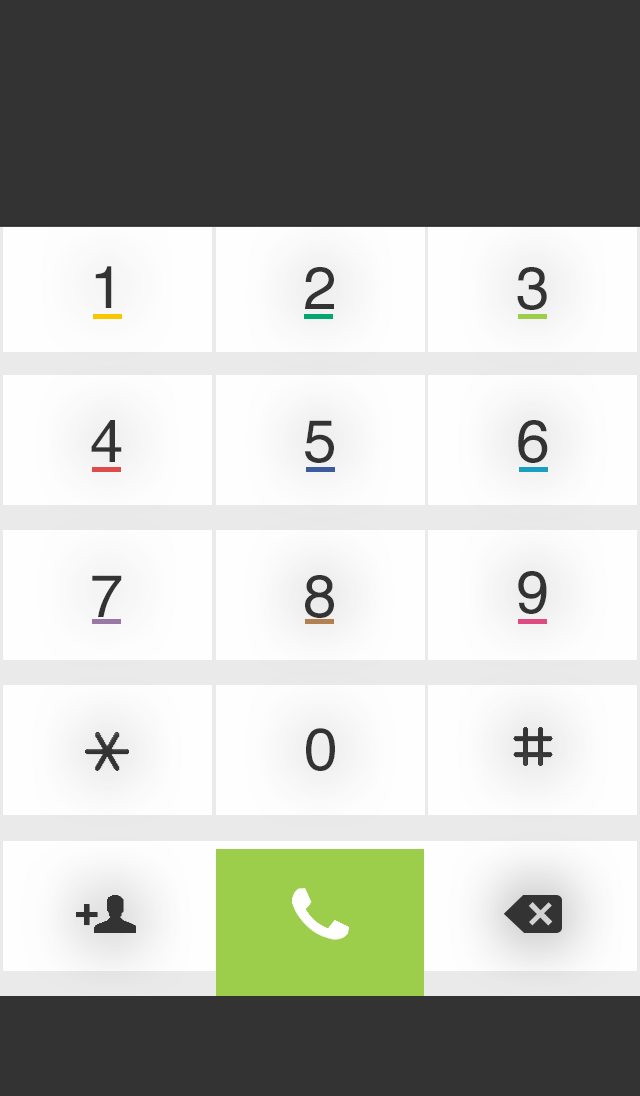
<style>
.page{position:relative;width:640px;height:1096px;background:#333333}
.page>*{position:absolute;margin:0}
.t1{font:60px "Helvetica";letter-spacing:0.54em;color:#333333}
.t2{font:59.9px "Helvetica";letter-spacing:0.54em;color:#333333}
.t3{font:59.7px "Helvetica";letter-spacing:0.54em;color:#333333}
</style>
<div class="page">
<p class="t1" style="left:95px;top:266px;width:17px;height:42px">1</p>
<p class="t2" style="left:305px;top:267px;width:29px;height:42px">2</p>
<p class="t2" style="left:517px;top:267px;width:30px;height:43px">3</p>
<p class="t2" style="left:91px;top:420px;width:31px;height:42px">4</p>
<p class="t2" style="left:305px;top:420px;width:29px;height:43px">5</p>
<p class="t2" style="left:518px;top:420px;width:30px;height:43px">6</p>
<p class="t2" style="left:92px;top:575px;width:30px;height:42px">7</p>
<p class="t2" style="left:305px;top:575px;width:29px;height:43px">8</p>
<p class="t2" style="left:518px;top:571px;width:29px;height:43px">9</p>
<p class="t3" style="left:306px;top:728px;width:29px;height:43px">0</p>
</div>
